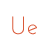
<style>
.page{position:relative;width:50px;height:50px;background:#ffffff}
.page>*{position:absolute;margin:0}
.t1{font:25px "JosefinSans";letter-spacing:0.02em;color:#da5a39}
</style>
<div class="page">
<p class="t1" style="left:12px;top:16px;width:25px;height:19px">Ue</p>
</div>
